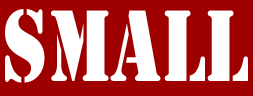
<style>
.page{position:relative;width:253px;height:96px;background:#9e0000}
.page>*{position:absolute;margin:0}
.t1{font:94.3px "StencilStd";letter-spacing:0.005em;color:#ffffff;scale:0.76 1}
</style>
<div class="page">
<p class="t1" style="left:5px;top:9px;width:243px;height:74px">small</p>
</div>
